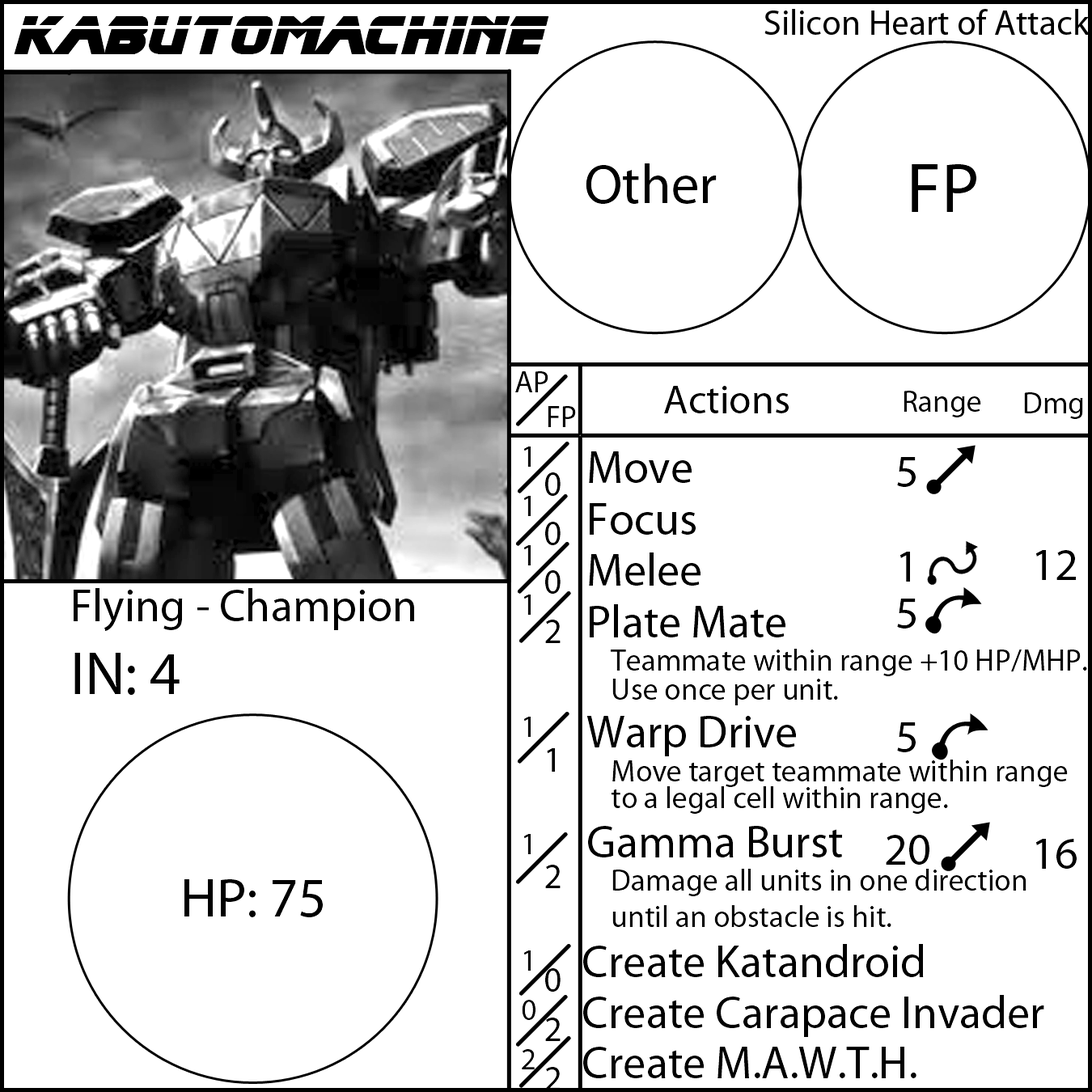
<style>
.page{position:relative;width:1092px;height:1092px;background:#ffffff}
.page>*{position:absolute;margin:0}
.t1{font:55.6px "BladeRunnerMovieFont";color:#000000}
.t2{font:35.4px "MyriadPro-Regular";color:#000000}
.t3{font:55.6px "MyriadPro-Regular";color:#000000}
.t4{font:70.8px "MyriadPro-Regular";color:#000000}
.t5{font:30.3px "MyriadPro-Regular";color:#000000}
.t6{font:40.4px "MyriadPro-Regular";color:#000000}
.t7{font:45.5px "MyriadPro-Regular";color:#000000}
.t8{font:60.7px "MyriadPro-Regular";color:#000000}
</style>
<div class="page">
<p class="t1" style="left:14px;top:16px;width:535px;height:38px">Kabutomachine</p>
<p class="t2" style="left:764px;top:9px;width:326px;height:26px">Silicon Heart of Attack</p>
<p class="t3" style="left:586px;top:163px;width:131px;height:41px">Other</p>
<p class="t4" style="left:912px;top:164px;width:64px;height:48px">FP</p>
<p class="t5" style="left:515px;top:371px;width:33px;height:21px">AP</p>
<p class="t6" style="left:664px;top:386px;width:125px;height:27px">Actions</p>
<p class="t5" style="left:904px;top:391px;width:77px;height:26px">Range</p>
<p class="t5" style="left:1024px;top:392px;width:59px;height:27px">Dmg</p>
<p class="t5" style="left:548px;top:406px;width:28px;height:21px">FP</p>
<p class="t5" style="left:522px;top:447px;width:13px;height:622px">1<br>1<br>1<br>1<br> <br>1<br> <br>1<br> <br>1<br>0<br>2</p>
<p class="t5" style="left:583px;top:451px;width:504px;height:627px"><span class="t7">Move<br>Focus<br>Melee<br>Plate Mate<br></span> Teammate within range +10 HP/MHP.  <br> Use once per unit. <br><span class="t7">Warp Drive<br></span> Move target teammate within range  <br> to a legal cell within range.<br><span class="t7">Gamma Burst<br></span> Damage all units in one direction     until an obstacle is hit.<br><span class="t7">Create Katandroid<br>Create Carapace Invader<br>Create M.A.W.T.H.</span></p>
<p class="t7" style="left:886px;top:457px;width:43px;height:408px;text-align:center">5<br><br>1<br>5<br> <br>5<br> <br>20</p>
<p class="t2" style="left:545px;top:472px;width:16px;height:618px">0<br>0<br>0<br>2<br> <br>1<br>  <br>2<br> <br>0<br>2<br>2</p>
<p class="t7" style="left:1035px;top:550px;width:42px;height:319px;text-align:center">12<br><br><br><br> <br>16</p>
<p class="t7" style="left:74px;top:588px;width:340px;height:107px">Flying - Champion<br><span class="t8">IN: 4</span></p>
<p class="t3" style="left:184px;top:879px;width:139px;height:38px">HP: 75</p>
</div>
